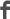
<style>
.page{position:relative;width:10px;height:19px;background:#ffffff}
.page>*{position:absolute;margin:0}
.t1{font:30px "Socialico";letter-spacing:0.05em;color:#4d4d4d;text-transform:uppercase}
</style>
<div class="page">
<p class="t1" style="left:0px;top:0px;width:10px;height:19px">F</p>
</div>
